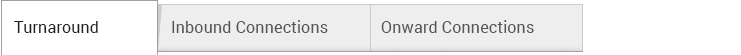
<style>
.page{position:relative;width:741px;height:55px;background:#ffffff}
.page>*{position:absolute;margin:0}
.t1{font:16px "Roboto-Regular";color:#222222}
.t2{font:16px "Roboto-Regular";color:#555555}
</style>
<div class="page">
<p class="t1" style="left:14px;top:21px;width:84px;height:12px">Turnaround</p>
<p class="t2" style="left:172px;top:20px;width:156px;height:13px">Inbound Connections</p>
<p class="t2" style="left:381px;top:20px;width:153px;height:13px">Onward Connections</p>
</div>
